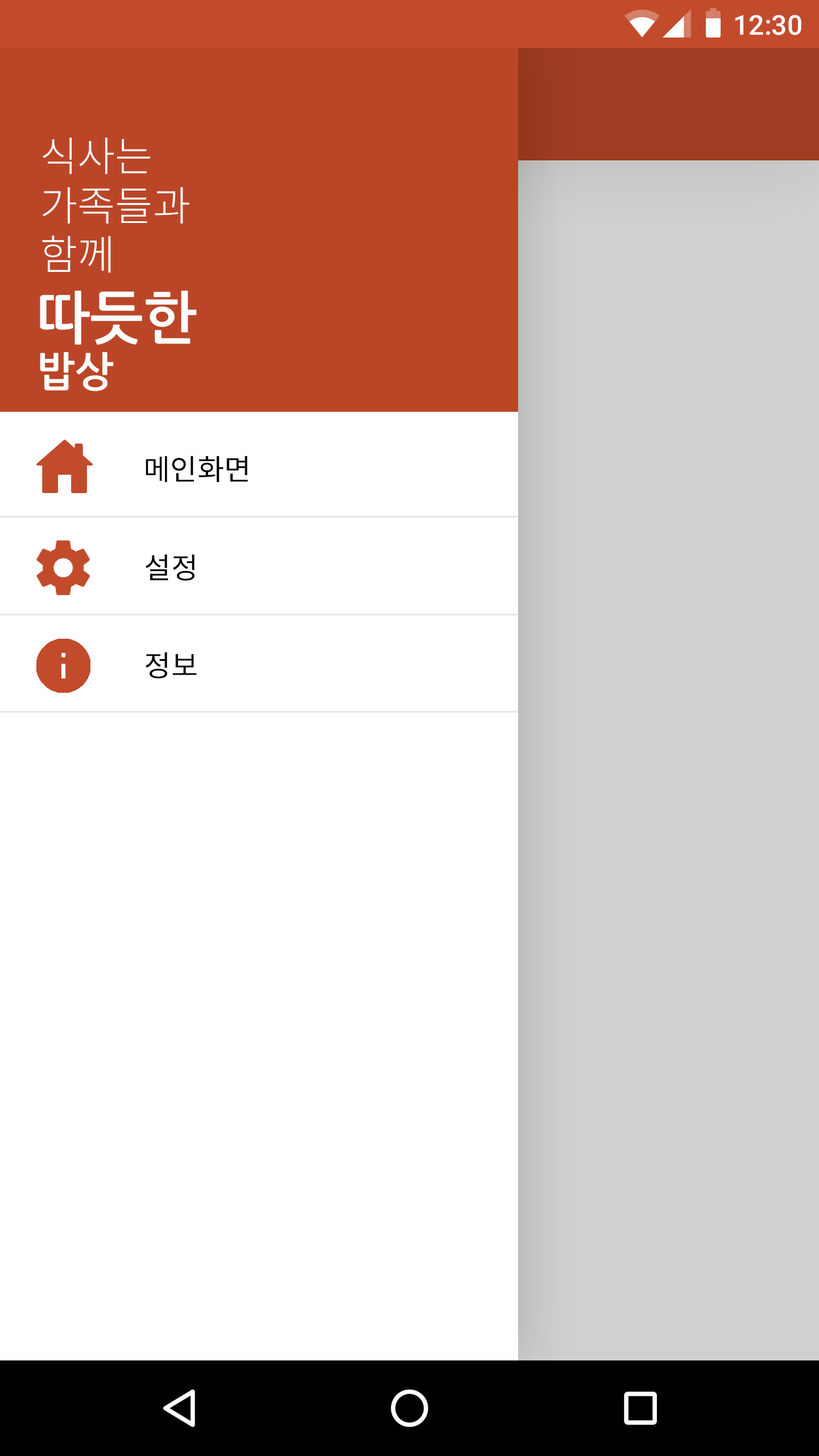
<style>
.page{position:relative;width:819px;height:1456px;background:#ffffff}
.page>*{position:absolute;margin:0}
.t1{font:27.3px "Roboto-Medium";color:#ffffff}
.t2{font:40.9px "NotoSansCJKkr-Light";color:#ffffff}
.t3{font:40.9px/10.2px "NotoSansCJKkr-Light";color:#ffffff}
.t4{font:56.9px/10.2px "NanumGothicBold";color:#ffffff}
.t5{font:40.9px "NanumGothicBold";color:#ffffff}
.t6{font:29.2px "NotoSansCJKkr-Regular";color:#000000}
</style>
<div class="page">
<p class="t1" style="left:735px;top:15px;width:66px;height:20px">12:30</p>
<p class="t2" style="left:42px;top:138px;width:147px;height:135px"><span class="t3">식사는 <br></span>가족들과<br>함께</p>
<p class="t4" style="left:40px;top:291px;width:157px;height:100px">따듯한<br><span class="t5">밥상</span></p>
<p class="t6" style="left:146px;top:456px;width:102px;height:26px">메인화면</p>
<p class="t6" style="left:145px;top:555px;width:50px;height:26px">설정</p>
<p class="t6" style="left:145px;top:652px;width:52px;height:27px">정보</p>
</div>
